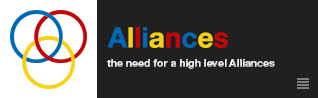
<style>
.page{position:relative;width:318px;height:98px;background:#202020}
.page>*{position:absolute;margin:0}
.t1{font:48px "HelveticaNeueLTPro-Bd";color:#0069b4}
.t2{font:48px "HelveticaNeueLTPro-Bd";color:#f7d117}
.t3{font:48px "HelveticaNeueLTPro-Bd";color:#c30505}
.t4{font:48px "HelveticaNeueLTPro-Bd";color:#f7d21c}
.t5{font:18px "HelveticaNeueLTPro-Bd";color:#e4e4e4}
.t6{font:18px "HelveticaNeueLTPro-Bd"}
</style>
<div class="page">
<p class="t1" style="left:107px;top:27px;width:121px;height:21px">A<span class="t2">l</span><span class="t3">l</span>i<span class="t4">a</span><span class="t3">n</span>c<span class="t2">e</span><span class="t3">s</span></p>
<p class="t5" style="left:107px;top:59px;width:168px;height:10px">the need for a high level Alliances</p>
<p class="t6" style="left:108px;top:59px;width:159px;height:10px">European IT Companies in India</p>
<p class="t6" style="left:108px;top:59px;width:159px;height:10px">European IT Companies in India</p>
</div>
